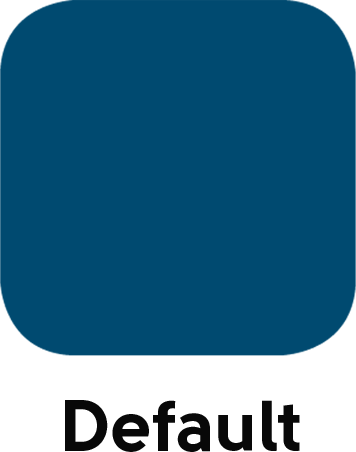
<style>
.page{position:relative;width:356px;height:452px;background:#004a70}
.page>*{position:absolute;margin:0}
.t1{font:72px "Solomon-Sans-Bold";color:#080808}
</style>
<div class="page">
<p class="t1" style="left:65px;top:400px;width:235px;height:52px">Default</p>
</div>
